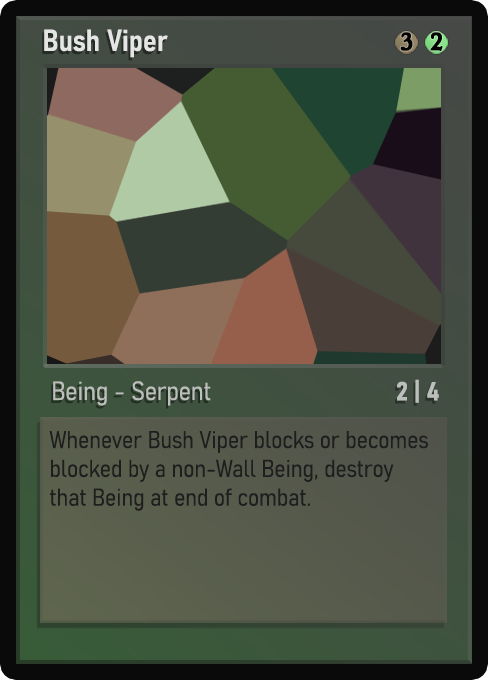
<style>
.page{position:relative;width:488px;height:680px}
.page>*{position:absolute;margin:0}
.t1{font:30px "Bahnschrift-SemiBoldSemiCondensed";color:#f2f2f2;font-weight:bold}
.t2{font:25px "WTRRoycroft";color:#000000;font-weight:bold;scale:1.09 1}
.t3{font:26px "Bahnschrift-LightSemiCondensed";color:#c8c8c8;font-weight:bold}
.t4{font:26px "Bahnschrift-BoldSemiCondensed";color:#bdbfbd;font-weight:bold}
.t5{font:24px "Bahnschrift-LightSemiCondensed";color:#1e1e1e;font-weight:bold}
</style>
<div class="page">
<p class="t1" style="left:44px;top:29px;width:124px;height:29px;opacity:0.9">Bush Viper</p>
<p class="t2" style="left:400px;top:32px;width:13px;height:19px">3</p>
<p class="t2" style="left:430px;top:32px;width:13px;height:19px">2</p>
<p class="t3" style="left:53px;top:381px;width:158px;height:25px;opacity:0.9">Being - Serpent</p>
<p class="t4" style="left:397px;top:379px;width:42px;height:24px">2 | 4</p>
<p class="t5" style="left:49px;top:431px;width:379px;height:80px">Whenever Bush Viper blocks or becomes blocked by a non-Wall Being, destroy that Being at end of combat.</p>
</div>
